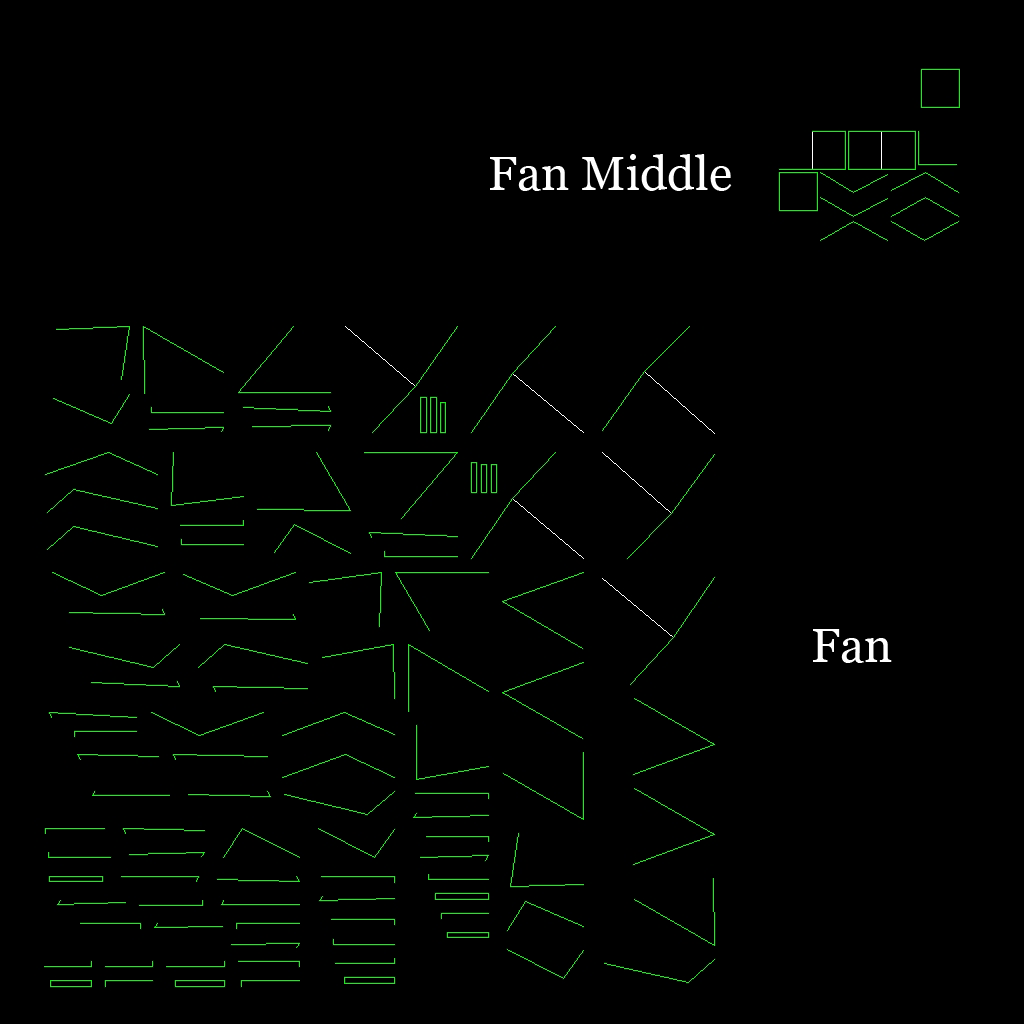
<style>
.page{position:relative;width:1024px;height:1024px;background:#000000}
.page>*{position:absolute;margin:0}
.t1{font:48px "Georgia";color:#ffffff}
</style>
<div class="page">
<p class="t1" style="left:490px;top:154px;width:242px;height:37px">Fan Middle</p>
<p class="t1" style="left:813px;top:629px;width:79px;height:34px">Fan</p>
</div>
